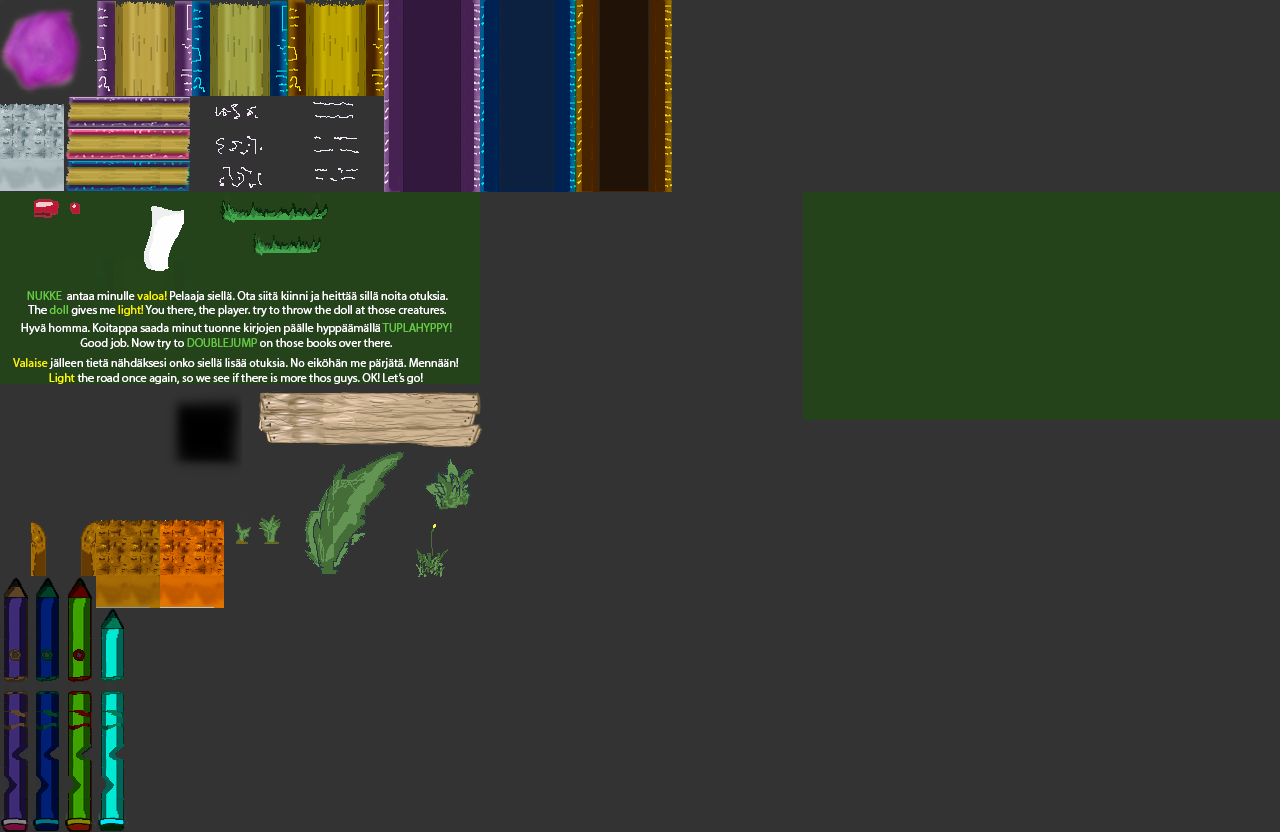
<style>
.page{position:relative;width:1280px;height:832px;background:#333333}
.page>*{position:absolute;margin:0}
.t1{font:12px "MyriadPro-Regular";color:#ffffff}
.t2{font:12px "MyriadPro-Regular";color:#63c644}
.t3{font:12px "MyriadPro-Regular";color:#fff700}
.t4{font:12px "MyriadPro-Regular";color:#67cd46}
.t5{font:12px "MyriadPro-Regular";color:#f7ef0b}
.t6{font:12px "MyriadPro-Regular";color:#64c844}
.t7{font:12px "MyriadPro-Regular";color:#65c646}
</style>
<div class="page">
<p class="t1" style="left:27px;top:291px;width:421px;height:26px;text-align:center"><span class="t2">NUKKE</span>  antaa minulle <span class="t3">valoa! </span>Pelaaja siellä. Ota siitä kiinni ja heittää sillä noita otuksia.<br>The <span class="t4">doll</span> gives me <span class="t5">light! </span>You there, the player. try to throw the doll at those creatures.</p>
<p class="t1" style="left:21px;top:323px;width:431px;height:27px;text-align:center">Hyvä homma. Koitappa saada minut tuonne kirjojen päälle hyppäämällä <span class="t6">TUPLAHYPPY!<br></span>Good job. Now try to <span class="t7">DOUBLEJUMP</span> on those books over there.</p>
<p class="t1" style="left:13px;top:358px;width:446px;height:27px;text-align:center"><span class="t5">Valaise </span>jälleen tietä nähdäksesi onko siellä lisää otuksia. No eiköhän me pärjätä. Mennään!<br><span class="t3">Light </span>the road once again, so we see if there is more thos guys. OK! Let’s go!</p>
</div>
